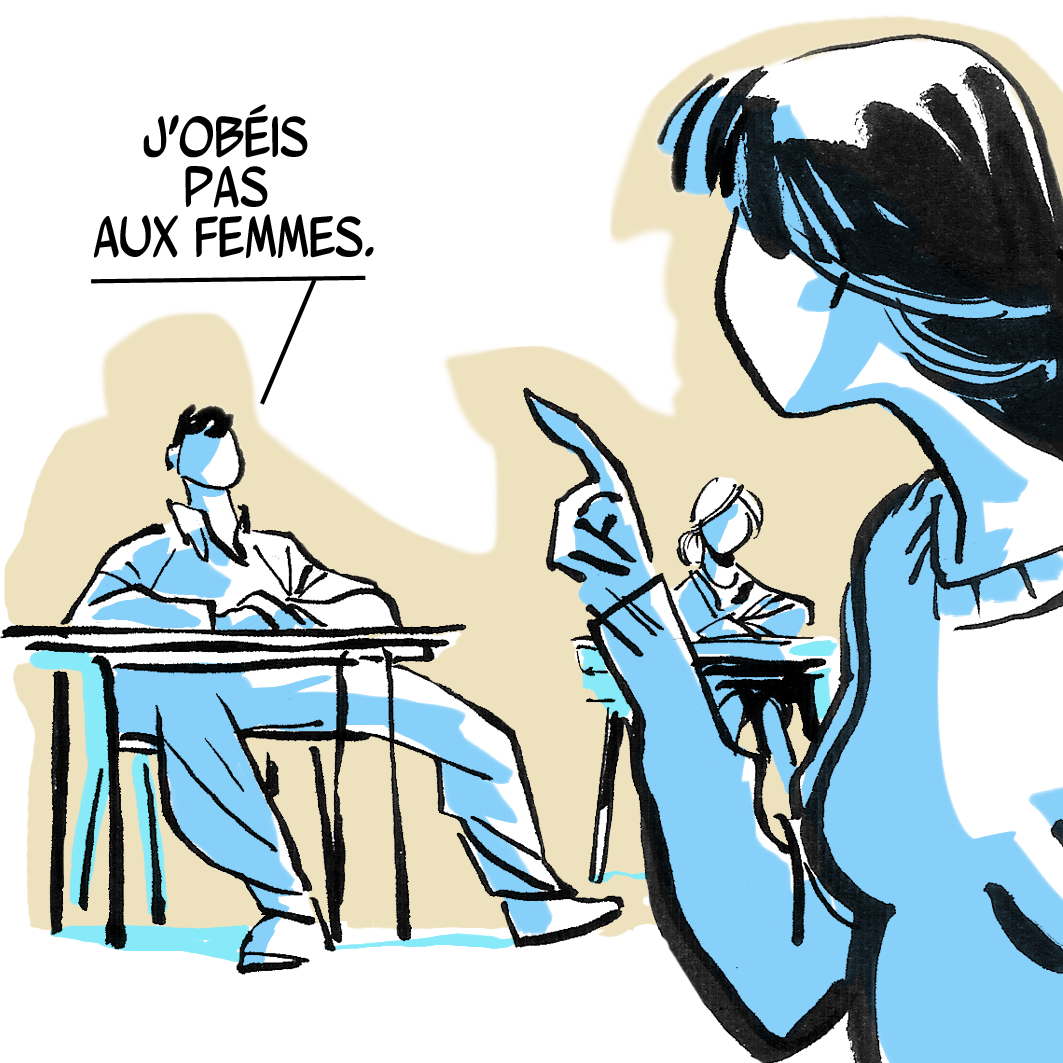
<style>
.page{position:relative;width:1063px;height:1063px;background:#ffffff}
.page>*{position:absolute;margin:0}
.t1{font:58.3px/50px "WurmicsBravo";color:#000000}
</style>
<div class="page">
<p class="t1" style="left:94px;top:104px;width:280px;height:154px;text-align:center">j’obéis <br>pas <br>aux femmes.</p>
</div>
